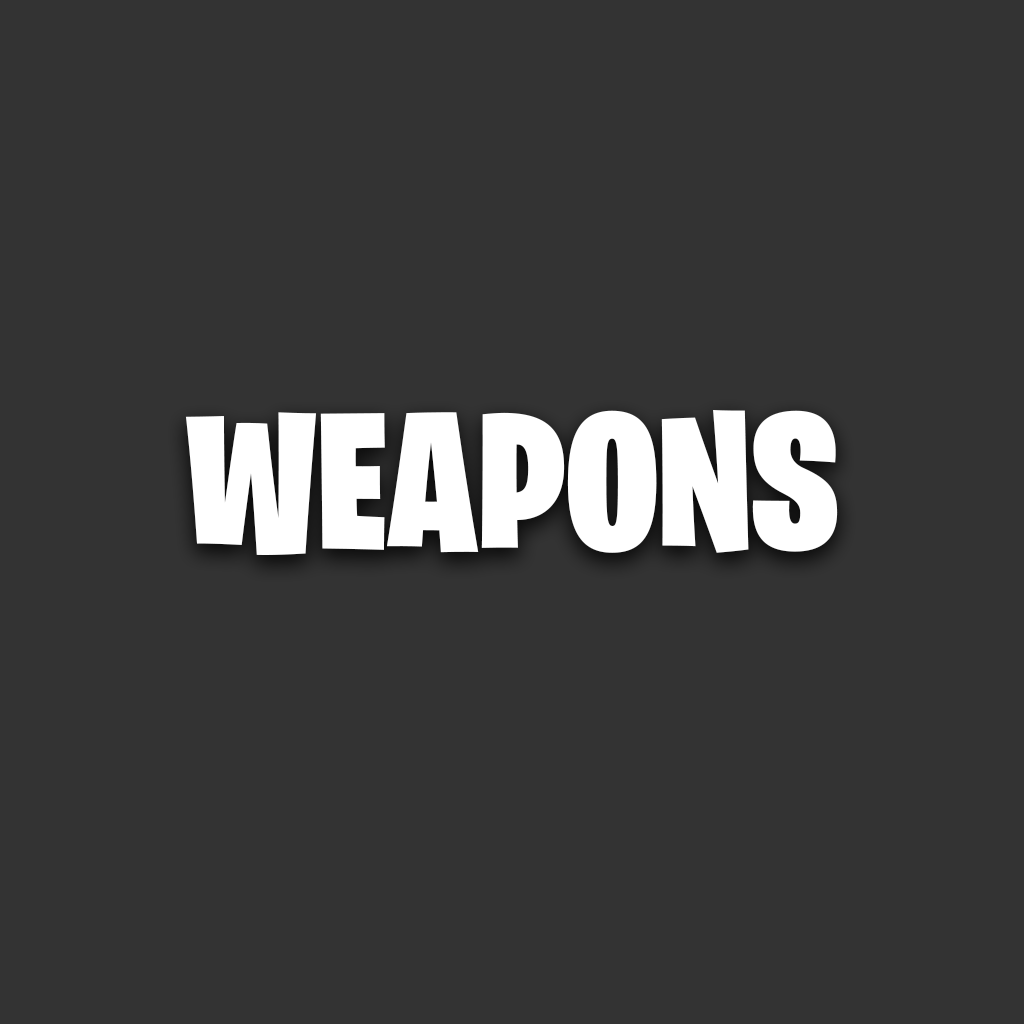
<style>
.page{position:relative;width:1024px;height:1024px;background:#333333}
.page>*{position:absolute;margin:0}
.t1{font:194.7px "BurbankBigCondensed-Black";color:#ffffff}
</style>
<div class="page">
<p class="t1" style="left:185px;top:410px;width:653px;height:145px">WEAPONS</p>
</div>
